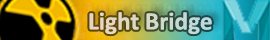
<style>
.page{position:relative;width:270px;height:40px}
.page>*{position:absolute;margin:0}
.t1{font:25.4px "Calibri-Bold";color:#d4d9c9}
</style>
<div class="page">
<p class="t1" style="left:89px;top:12px;width:123px;height:23px">Light Bridge</p>
</div>
